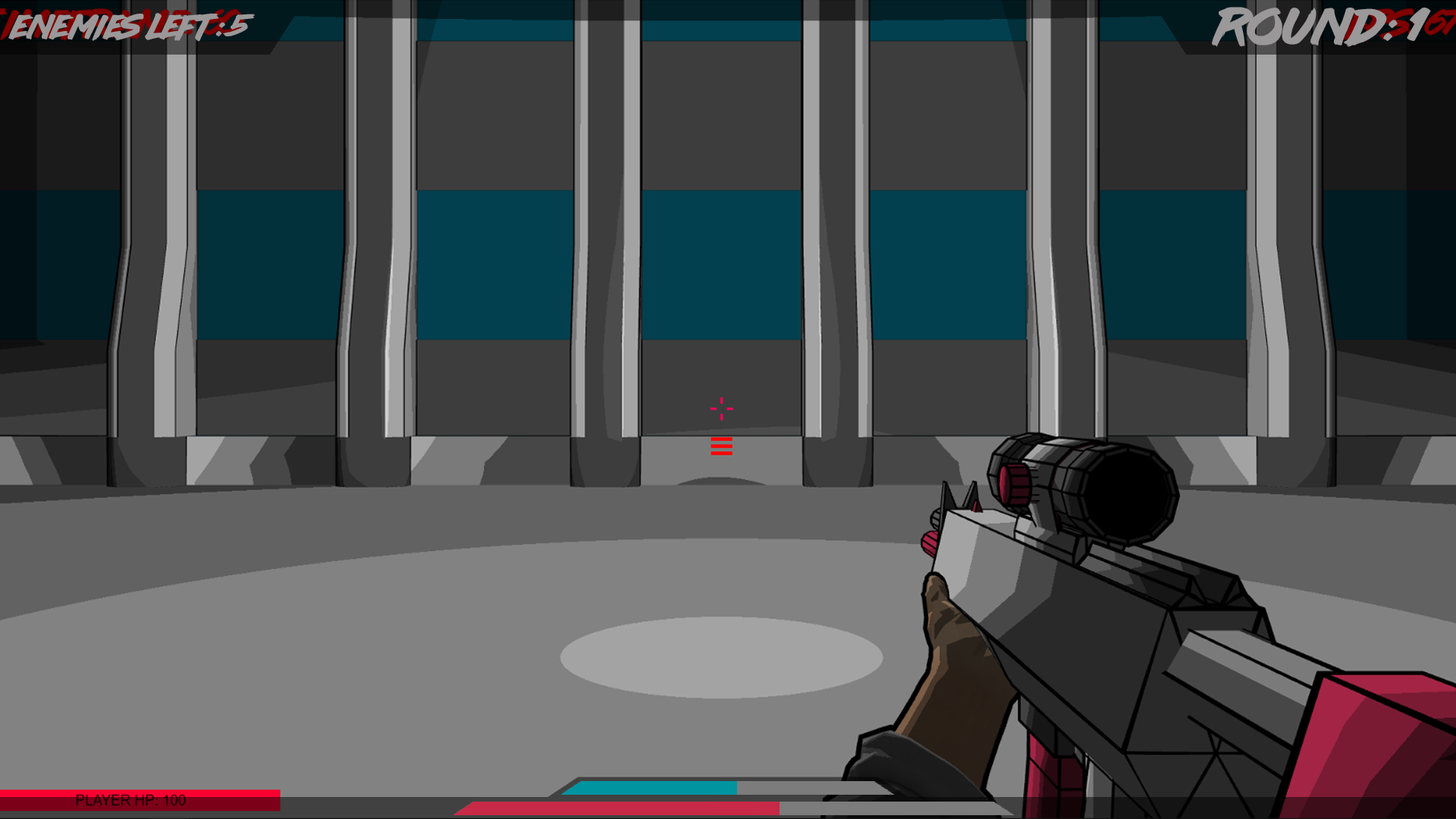
<style>
.page{position:relative;width:1456px;height:819px}
.page>*{position:absolute;margin:0}
.t1{font:30.3px "lazer84";color:#9a9899}
.t2{font:45.5px "lazer84";color:#9a9899}
</style>
<div class="page">
<p class="t1" style="left:8px;top:13px;width:247px;height:29px">Enemies Left: 5</p>
<p class="t2" style="left:1212px;top:7px;width:219px;height:40px">Round: 1</p>
</div>
